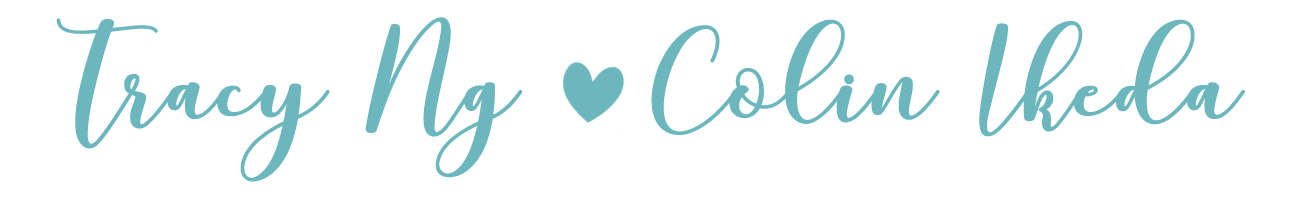
<style>
.page{position:relative;width:1289px;height:200px;background:#ffffff}
.page>*{position:absolute;margin:0}
.t1{font:200px "mottonademo";color:#6cb8bd}
</style>
<div class="page">
<p class="t1" style="left:56px;top:17px;width:1189px;height:165px">Tracy Ng   Colin Ikeda</p>
</div>
